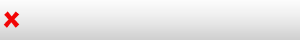
<style>
.page{position:relative;width:300px;height:40px}
.page>*{position:absolute;margin:0}
.t1{font:20.8px "LithosPro-Black";letter-spacing:-0.02em;color:#f20404}
</style>
<div class="page">
<p class="t1" style="left:3px;top:11px;width:17px;height:17px">X</p>
</div>
